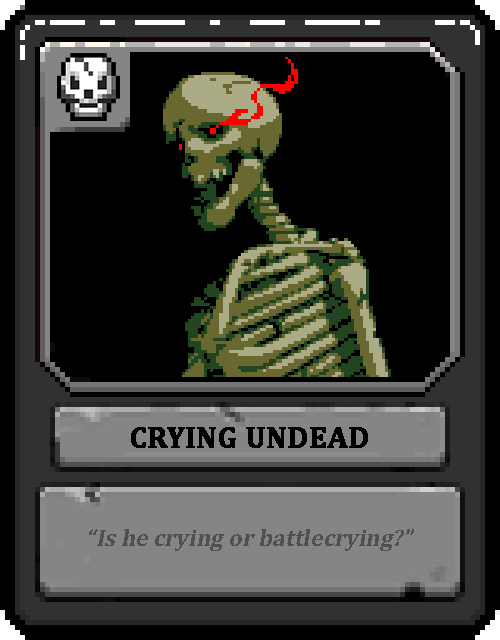
<style>
.page{position:relative;width:500px;height:640px;background:#000000}
.page>*{position:absolute;margin:0}
.t1{font:30px "Cambria-Bold";color:#000000;text-transform:uppercase;font-weight:bold}
.t2{font:24px "Cambria-Bold";color:#505050;font-style:italic}
</style>
<div class="page">
<p class="t1" style="left:131px;top:427px;width:237px;height:21px">Crying Undead</p>
<p class="t2" style="left:89px;top:529px;width:325px;height:22px">“Is he crying or battlecrying?”</p>
</div>
